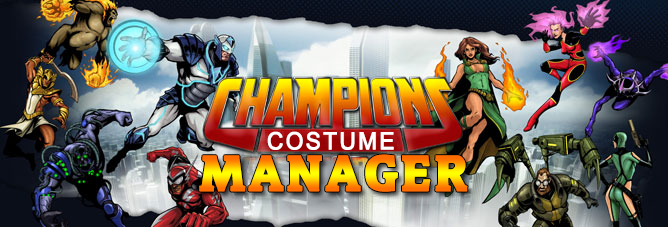
<style>
.page{position:relative;width:668px;height:227px}
.page>*{position:absolute;margin:0}
.t1{font:23.7px "ArialMT";letter-spacing:0.08em;color:#ffffff;font-weight:bold;scale:0.96 1}
.t2{font:48px "Commons";letter-spacing:0.08em;font-weight:bold}
</style>
<div class="page">
<p class="t1" style="left:267px;top:131px;width:127px;height:19px">COSTUME</p>
<p class="t2" style="left:199px;top:154px;width:269px;height:38px">MANAGER</p>
</div>
